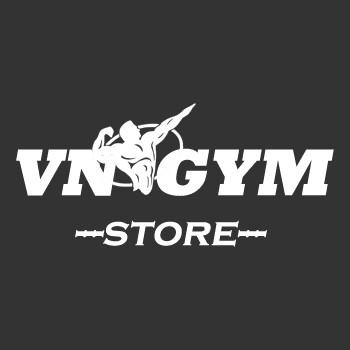
<style>
.page{position:relative;width:350px;height:350px;background:#333333}
.page>*{position:absolute;margin:0}
.t1{font:41.7px "CopperplateGothic-Bold";color:#ffffff;font-style:italic}
.t2{font:66.8px "Rockwell-ExtraBold";color:#ffffff;font-style:italic}
</style>
<div class="page">
<p class="t1" style="left:16px;top:148px;width:318px;height:99px;text-align:center"><span class="t2">VN  GYM<br></span>---store---</p>
</div>
